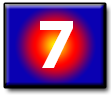
<style>
.page{position:relative;width:111px;height:96px}
.page>*{position:absolute;margin:0}
.t1{font:72px "MyriadPro-Bold";color:#ffffff}
</style>
<div class="page">
<p class="t1" style="left:40px;top:21px;width:33px;height:47px">7</p>
</div>
